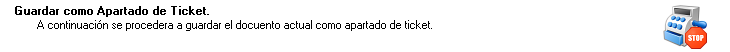
<style>
.page{position:relative;width:730px;height:52px;background:#ffffff}
.page>*{position:absolute;margin:0}
.t1{font:11.4px "MS Sans Serif";color:#000000;font-weight:bold}
.t2{font:11.4px "MS Sans Serif";color:#000000}
</style>
<div class="page">
<p class="t1" style="left:15px;top:6px;width:194px;height:11px">Guardar como Apartado de Ticket.</p>
<p class="t2" style="left:37px;top:20px;width:395px;height:11px">A continuación se procedera a guardar el docuento actual como apartado de ticket.</p>
</div>
